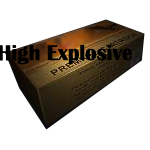
<style>
.page{position:relative;width:150px;height:150px;background:#ffffff}
.page>*{position:absolute;margin:0}
.t1{font:22.3px "BritannicBold";color:#000000;scale:0.95 1}
</style>
<div class="page">
<p class="t1" style="left:0px;top:44px;width:132px;height:21px">High Explosive</p>
</div>
